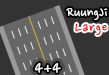
<style>
.page{position:relative;width:109px;height:75px;background:#333333}
.page>*{position:absolute;margin:0}
.t1{font:16px "NanumPen";color:#ffffff}
.t2{font:16px "NanumPen";letter-spacing:0.05em;color:#ff0000}
.t3{font:18px "NanumPen";letter-spacing:0.05em;color:#ffffff}
</style>
<div class="page">
<p class="t1" style="left:66px;top:8px;width:42px;height:12px">RuungJi</p>
<p class="t2" style="left:75px;top:23px;width:32px;height:12px">Large</p>
<p class="t3" style="left:34px;top:62px;width:27px;height:11px">4+4</p>
</div>
